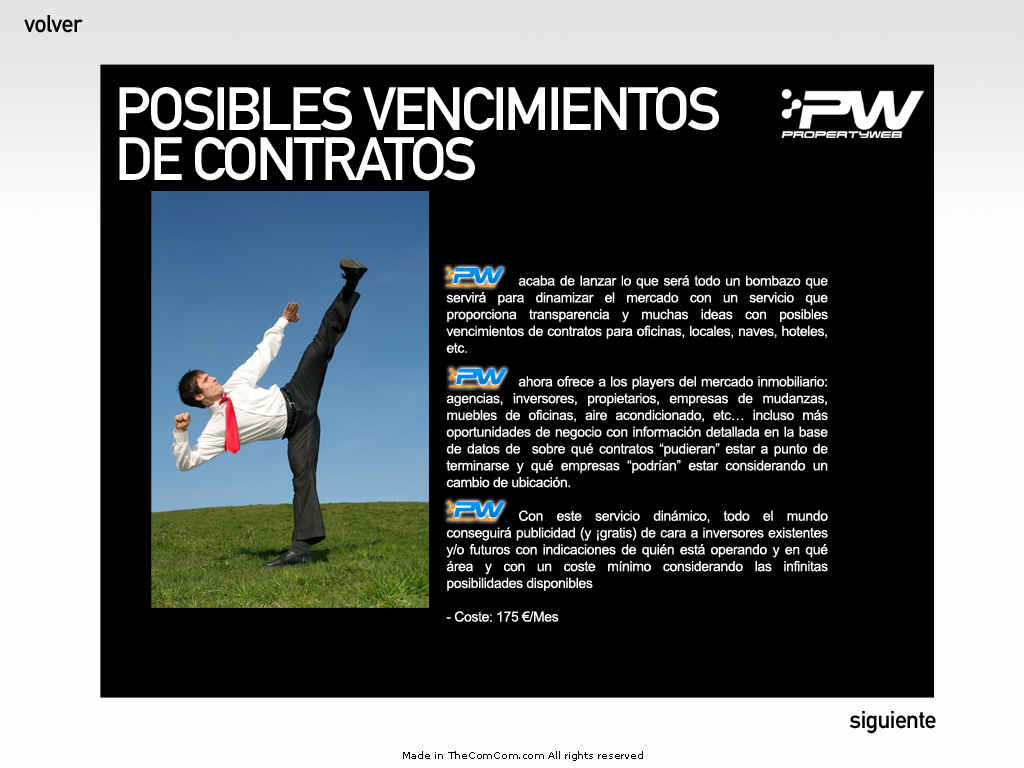
<style>
.page{position:relative;width:1024px;height:768px;background:#000000}
.page>*{position:absolute;margin:0}
.t1{font:24px "DINMittelschriftStd";letter-spacing:-0.025em;color:#000000}
.t2{font:60px "DINMittelschriftStd";letter-spacing:-0.05em;color:#ffffff}
.t3{font:14px "ArialMT";letter-spacing:-0.025em;color:#ffffff}
.t4{font:10px "MSReferenceSansSerif";letter-spacing:-0.025em;color:#010101}
</style>
<div class="page">
<p class="t1" style="left:24px;top:15px;width:59px;height:18px">volver</p>
<p class="t2" style="left:119px;top:87px;width:600px;height:94px">POSIBLES VENCIMIENTOS DE CONTRATOS</p>
<p class="t3" style="left:446px;top:275px;width:382px;height:347px;text-align:justify">acaba de lanzar lo que será todo un bombazo que servirá para dinamizar el mercado con un servicio que proporciona transparencia y muchas ideas con posibles vencimientos de contratos para oficinas, locales, naves, hoteles, etc.<br>                             <br>  ahora ofrece a los players del mercado inmobiliario: agencias, inversores, propietarios, empresas de mudanzas, muebles de oficinas, aire acondicionado, etc… incluso más oportunidades de negocio con información detallada en la base de datos de  sobre qué contratos “pudieran” estar a punto de terminarse y qué empresas “podrían” estar considerando un cambio de ubicación.<br><br>                   Con este servicio dinámico, todo el mundo conseguirá publicidad (y ¡gratis) de cara a inversores existentes y/o futuros con indicaciones de quién está operando y en qué área y con un coste mínimo considerando las infinitas posibilidades disponibles<br><br>- Coste: 175 €/Mes</p>
<p class="t1" style="left:849px;top:711px;width:87px;height:23px">siguiente</p>
<p class="t4" style="left:403px;top:751px;width:240px;height:10px">Made in TheComCom.com All rights reserved</p>
</div>
